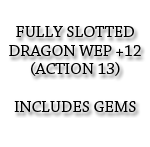
<style>
.page{position:relative;width:150px;height:147px;background:#ffffff}
.page>*{position:absolute;margin:0}
.t1{font:16px/18.7px "ChaparralPro-Regular";color:#000000;text-transform:uppercase;scale:1.04 1}
</style>
<div class="page">
<p class="t1" style="left:9px;top:26px;width:132px;height:86px;text-align:center">Fully Slotted<br>Dragon Wep +12<br>(Action 13)<br><br>Includes Gems</p>
</div>
